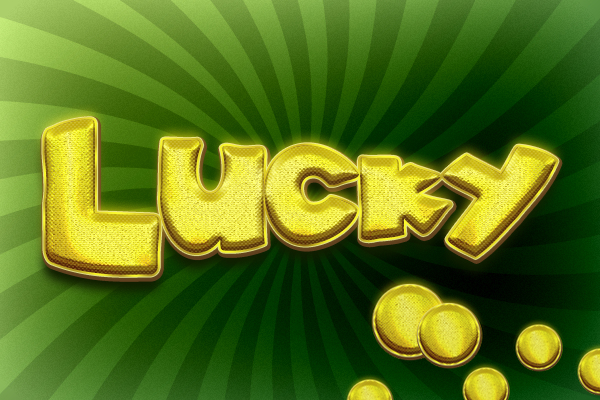
<style>
.page{position:relative;width:600px;height:400px}
.page>*{position:absolute;margin:0}
.t1{font:128px "akaDylanPlain"}
</style>
<div class="page">
<p class="t1" style="left:44px;top:119px;width:513px;height:156px">Lucky</p>
<p class="t1" style="left:44px;top:119px;width:513px;height:156px">Lucky</p>
<p class="t1" style="left:44px;top:119px;width:513px;height:156px">Lucky</p>
</div>
